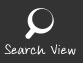
<style>
.page{position:relative;width:83px;height:63px;background:#333333}
.page>*{position:absolute;margin:0}
.t1{font:14.5px "ArdleysHand-Plain";color:#ffffff}
</style>
<div class="page">
<p class="t1" style="left:4px;top:44px;width:72px;height:11px">Search View</p>
</div>
